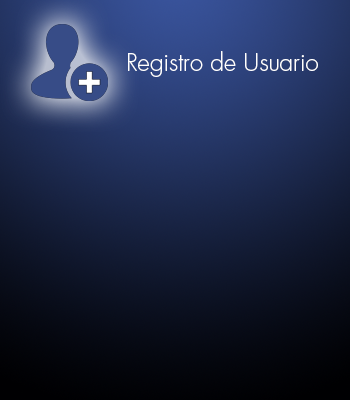
<style>
.page{position:relative;width:350px;height:400px}
.page>*{position:absolute;margin:0}
.t1{font:24px "FuturaStd-Light";color:#ffffff}
</style>
<div class="page">
<p class="t1" style="left:128px;top:51px;width:190px;height:26px">Registro de Usuario</p>
</div>
